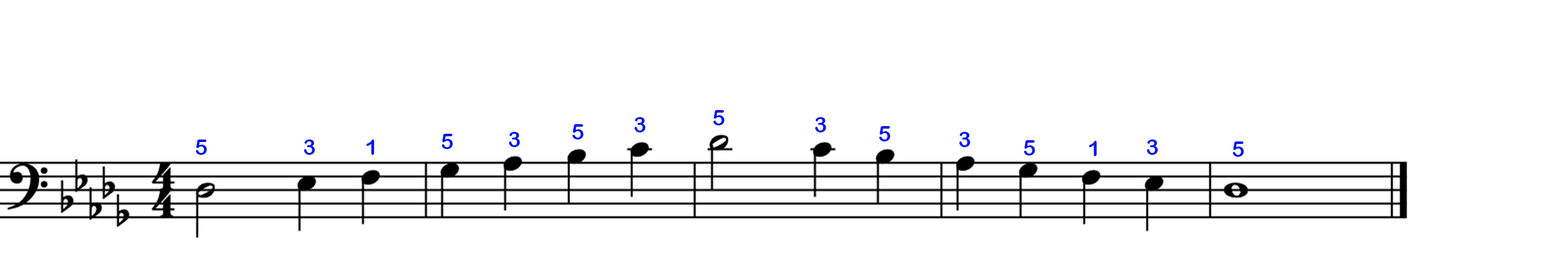
<style>
.page{position:relative;width:1568px;height:279px;background:#ffffff}
.page>*{position:absolute;margin:0}
.t1{font:21.8px "ArialRoundedMTBold";color:#0417ec}
</style>
<div class="page">
<p class="t1" style="left:713px;top:110px;width:11px;height:16px">5</p>
<p class="t1" style="left:572px;top:124px;width:12px;height:16px">5</p>
<p class="t1" style="left:634px;top:117px;width:12px;height:16px">3</p>
<p class="t1" style="left:815px;top:117px;width:11px;height:16px">3</p>
<p class="t1" style="left:441px;top:134px;width:12px;height:15px">5</p>
<p class="t1" style="left:509px;top:132px;width:11px;height:15px">3</p>
<p class="t1" style="left:879px;top:126px;width:11px;height:16px">5</p>
<p class="t1" style="left:959px;top:132px;width:11px;height:15px">3</p>
<p class="t1" style="left:195px;top:140px;width:12px;height:15px">5</p>
<p class="t1" style="left:304px;top:140px;width:11px;height:15px">3</p>
<p class="t1" style="left:366px;top:140px;width:9px;height:15px">1</p>
<p class="t1" style="left:1024px;top:140px;width:11px;height:16px">5</p>
<p class="t1" style="left:1089px;top:141px;width:8px;height:15px">1</p>
<p class="t1" style="left:1147px;top:140px;width:11px;height:15px">3</p>
<p class="t1" style="left:1232px;top:142px;width:12px;height:15px">5</p>
</div>
